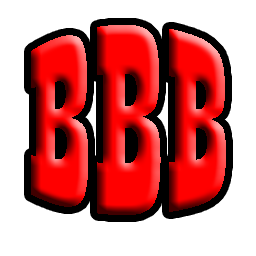
<style>
.page{position:relative;width:256px;height:256px;background:#ffffff}
.page>*{position:absolute;margin:0}
.t1{font:207.5px "Playbill"}
</style>
<div class="page">
<p class="t1" style="left:31px;top:25px;width:195px;height:190px">BBB</p>
</div>
